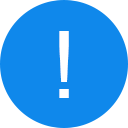
<style>
.page{position:relative;width:128px;height:128px;background:#0f88eb}
.page>*{position:absolute;margin:0}
.t1{font:94px "MicrosoftSansSerif";color:#ffffff}
</style>
<div class="page">
<p class="t1" style="left:59px;top:31px;width:10px;height:67px">!</p>
</div>
